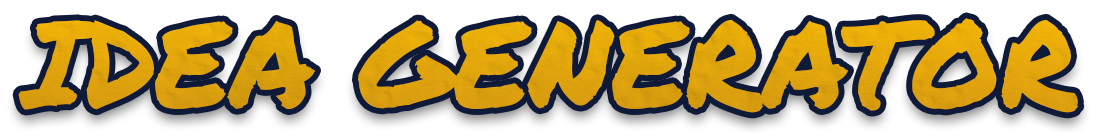
<style>
.page{position:relative;width:1096px;height:137px;background:#ffffff}
.page>*{position:absolute;margin:0}
.t1{font:120.2px "PermanentMarker-Regular";color:#de9d13}
</style>
<div class="page">
<p class="t1" style="left:18px;top:18px;width:1061px;height:95px">IDEA GENERATOR</p>
</div>
